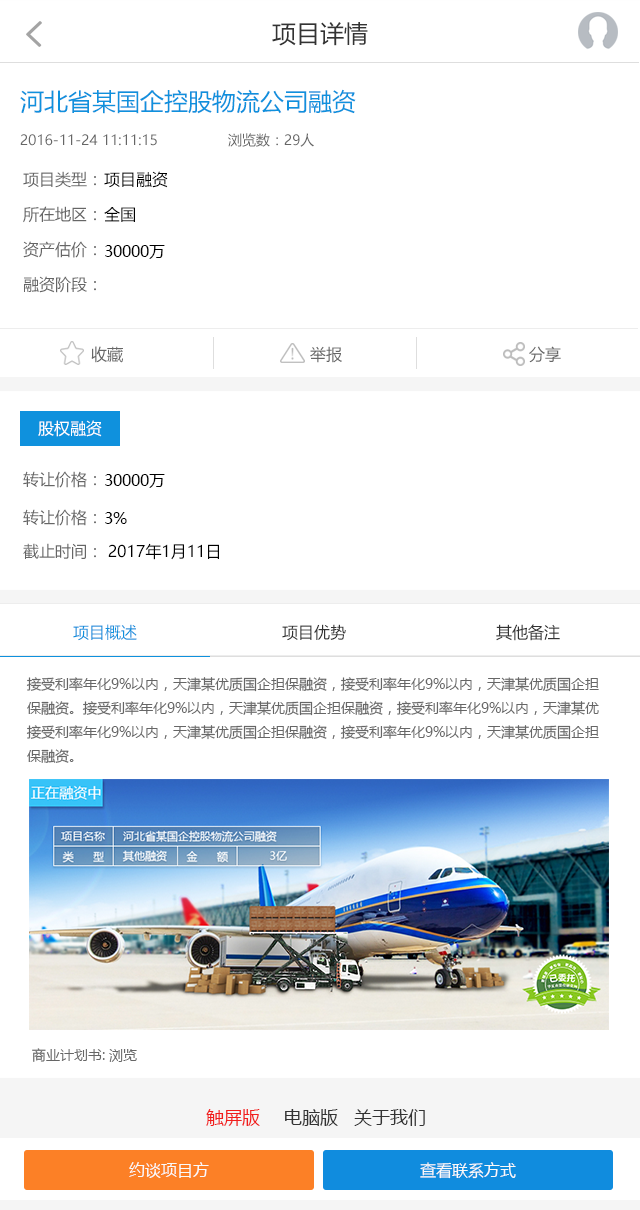
<style>
.page{position:relative;width:640px;height:1210px;background:#ffffff}
.page>*{position:absolute;margin:0}
.t1{font:24px "MicrosoftYaHei";color:#333333}
.t2{font:24px "MicrosoftYaHei";color:#0f91dd}
.t3{font:14px "MicrosoftYaHei";color:#666666}
.t4{font:16px "MicrosoftYaHei";color:#666666}
.t5{font:16px "MicrosoftYaHei";color:#000000}
.t6{font:16px "MicrosoftYaHei";color:#ffffff}
.t7{font:16px "MicrosoftYaHei";color:#0f91dd}
.t8{font:16px "MicrosoftYaHei";color:#333333}
.t9{font:14px/24px "MicrosoftYaHei";color:#666666}
.t10{font:18px "MicrosoftYaHei";color:#f11d1c}
.t11{font:18px "MicrosoftYaHei";color:#333333}
.t12{font:16px "MicrosoftYaHei";color:#fafaf9}
</style>
<div class="page">
<p class="t1" style="left:272px;top:22px;width:96px;height:24px">项目详情</p>
<p class="t2" style="left:20px;top:89px;width:336px;height:25px">河北省某国企控股物流公司融资</p>
<p class="t3" style="left:20px;top:133px;width:294px;height:14px">2016-11-24 11:11:15　　　　　浏览数：29人</p>
<p class="t4" style="left:23px;top:171px;width:73px;height:17px">项目类型：</p>
<p class="t5" style="left:104px;top:171px;width:64px;height:17px">项目融资</p>
<p class="t4" style="left:23px;top:206px;width:73px;height:17px">所在地区：</p>
<p class="t5" style="left:104px;top:207px;width:31px;height:15px">全国</p>
<p class="t4" style="left:23px;top:241px;width:73px;height:17px">资产估价：</p>
<p class="t5" style="left:105px;top:245px;width:60px;height:14px">30000万</p>
<p class="t4" style="left:24px;top:276px;width:72px;height:17px">融资阶段：</p>
<p class="t4" style="left:91px;top:346px;width:32px;height:17px">收藏</p>
<p class="t4" style="left:310px;top:346px;width:32px;height:17px">举报</p>
<p class="t4" style="left:529px;top:346px;width:32px;height:17px">分享</p>
<p class="t6" style="left:38px;top:420px;width:64px;height:17px">股权融资</p>
<p class="t4" style="left:23px;top:471px;width:73px;height:17px">转让价格：</p>
<p class="t5" style="left:105px;top:474px;width:60px;height:14px">30000万</p>
<p class="t4" style="left:23px;top:509px;width:73px;height:17px">转让价格：</p>
<p class="t5" style="left:105px;top:512px;width:22px;height:12px">3%</p>
<p class="t5" style="left:23px;top:543px;width:196px;height:17px"><span class="t4">截止时间： </span>2017年1月11日</p>
<p class="t7" style="left:73px;top:624px;width:64px;height:17px">项目概述</p>
<p class="t8" style="left:282px;top:624px;width:64px;height:17px">项目优势</p>
<p class="t8" style="left:496px;top:624px;width:64px;height:17px">其他备注</p>
<p class="t9" style="left:26px;top:677px;width:573px;height:86px">接受利率年化9%以内，天津某优质国企担保融资，接受利率年化9%以内，天津某优质国企担<br>保融资。接受利率年化9%以内，天津某优质国企担保融资，接受利率年化9%以内，天津某优<br>接受利率年化9%以内，天津某优质国企担保融资，接受利率年化9%以内，天津某优质国企担<br>保融资。</p>
<p class="t3" style="left:32px;top:1048px;width:105px;height:14px">商业计划书: 浏览</p>
<p class="t10" style="left:206px;top:1109px;width:54px;height:17px">触屏版</p>
<p class="t11" style="left:285px;top:1109px;width:53px;height:17px">电脑版</p>
<p class="t11" style="left:354px;top:1109px;width:71px;height:17px">关于我们</p>
<p class="t12" style="left:129px;top:1162px;width:80px;height:16px">约谈项目方</p>
<p class="t12" style="left:420px;top:1162px;width:96px;height:17px">查看联系方式</p>
</div>
